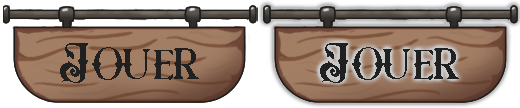
<style>
.page{position:relative;width:520px;height:108px}
.page>*{position:absolute;margin:0}
.t1{font:52.6px "RoseKnight-Regular";color:#202020}
</style>
<div class="page">
<p class="t1" style="left:60px;top:43px;width:139px;height:40px">Jouer</p>
<p class="t1" style="left:320px;top:43px;width:139px;height:40px">Jouer</p>
</div>
